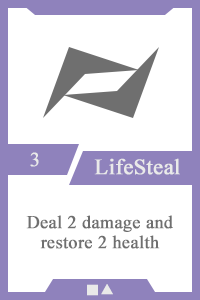
<style>
.page{position:relative;width:200px;height:300px;background:#ffffff}
.page>*{position:absolute;margin:0}
.t1{font:20px "TimesNewRomanPSMT";color:#e9e9e9;font-weight:bold}
.t2{font:22px "TimesNewRomanPSMT";color:#e9e9e9;font-weight:bold}
.t3{font:18px/20px "TimesNewRomanPSMT";color:#6f6f6f;font-weight:bold}
.t4{font:14px "AdobeHeitiStd-Regular";color:#e9e9e9;font-weight:bold}
</style>
<div class="page">
<p class="t1" style="left:30px;top:152px;width:9px;height:15px">3</p>
<p class="t2" style="left:94px;top:158px;width:86px;height:17px">LifeSteal</p>
<p class="t3" style="left:26px;top:215px;width:147px;height:34px;text-align:center">Deal 2 damage and restore 2 health</p>
<p class="t4" style="left:87px;top:284px;width:26px;height:12px">■▲</p>
</div>
